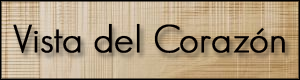
<style>
.page{position:relative;width:300px;height:80px}
.page>*{position:absolute;margin:0}
.t1{font:38px "GeosansLight";color:#040000;font-weight:bold}
</style>
<div class="page">
<p class="t1" style="left:13px;top:23px;width:272px;height:31px">Vista del Corazón</p>
</div>
